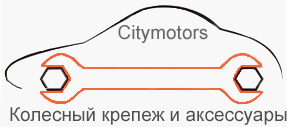
<style>
.page{position:relative;width:287px;height:127px;background:#f8f8f8}
.page>*{position:absolute;margin:0}
.t1{font:19px "ArialMT";color:#4f4f4f}
</style>
<div class="page">
<p class="t1" style="left:10px;top:107px;width:277px;height:18px">Колесный крепеж и аксесcуары</p>
</div>
